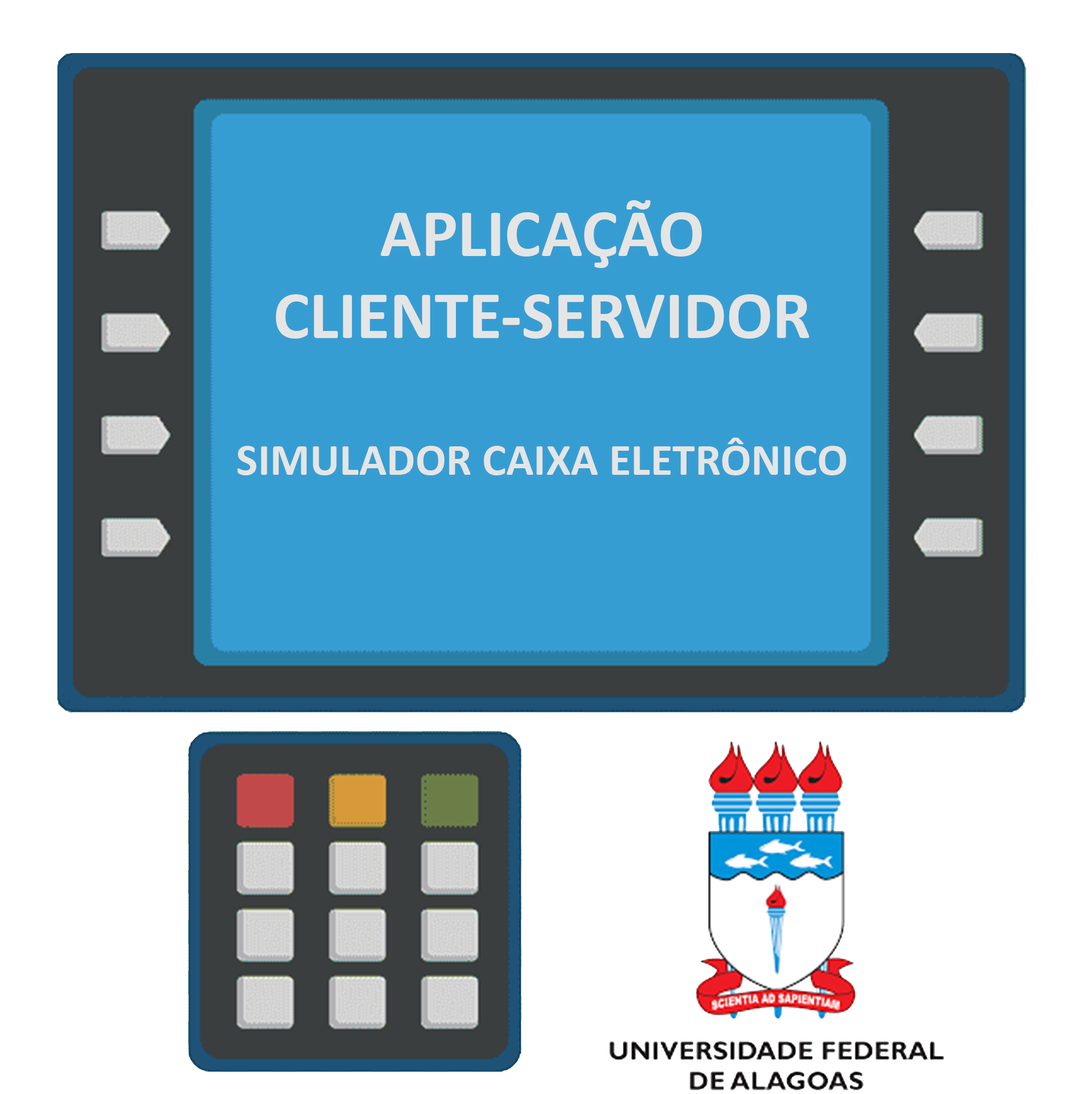
<style>
.page{position:relative;width:1090px;height:1094px;background:#ffffff}
.page>*{position:absolute;margin:0}
.t1{font:68.4px "Calibri-Bold";color:#e5e5e5}
.t2{font:45.6px "Calibri-Bold";color:#e5e5e5}
</style>
<div class="page">
<p class="t1" style="left:237px;top:200px;width:609px;height:275px;text-align:center">APLICAÇÃO<br>CLIENTE-SERVIDOR<br><br><span class="t2">SIMULADOR CAIXA ELETRÔNICO</span></p>
</div>
